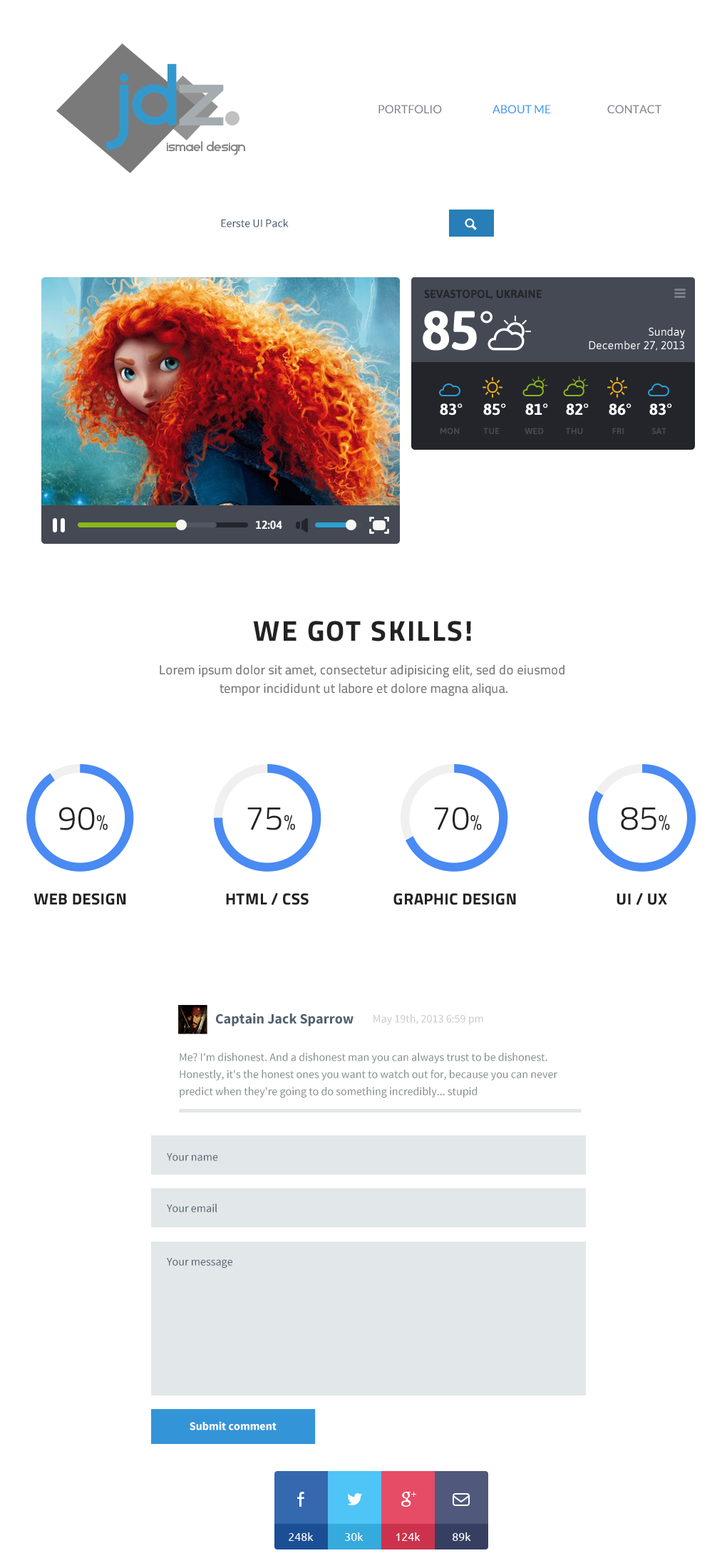
<style>
.page{position:relative;width:727px;height:1568px;background:#ffffff}
.page>*{position:absolute;margin:0}
.t1{font:11.4px "Lato-Regular";color:#7c8389;text-transform:uppercase}
.t2{font:11.4px "Lato-Regular";color:#4495f1;text-transform:uppercase}
.t3{font:11.4px "SourceSansPro-Regular";color:#384e64}
.t4{font:11.4px "Asap-Bold";color:#23252b;text-transform:uppercase}
.t5{font:55.5px "Asap-Bold";letter-spacing:0.025em;color:#ffffff}
.t6{font:11.4px "Asap-Regular";color:#ffffff}
.t7{font:15.7px "Asap-Bold";color:#ffffff;text-transform:uppercase;scale:1.04 1}
.t8{font:8.6px "Asap-Bold";color:#444953;text-transform:uppercase;scale:1.04 1}
.t9{font:11.4px "Asap-Bold";color:#ffffff}
.t10{font:28.5px "TitilliumWeb-Bold";letter-spacing:0.06em;color:#222222}
.t11{font:12.8px/18.5px "TitilliumWeb-Regular";letter-spacing:0.02em;color:#777777}
.t12{font:33.6px "TitilliumWeb-Light";letter-spacing:0.02em;color:#222222;text-transform:uppercase}
.t13{font:21.5px "TitilliumWeb-Light";letter-spacing:0.02em;color:#222222;text-transform:uppercase}
.t14{font:16.1px "TitilliumWeb-Bold";letter-spacing:0.02em;color:#222222;text-transform:uppercase}
.t15{font:14.3px "SourceSansPro-Bold";color:#526170}
.t16{font:11.4px "SourceSansPro-Regular";color:#c6cbce}
.t17{font:11.4px/17.1px "SourceSansPro-Regular";color:#7f8c8d}
.t18{font:11.4px "SourceSansPro-Regular";color:#526170}
.t19{font:11.4px "SourceSansPro-Bold";color:#ffffff}
.t20{font:11.4px "Ubuntu";color:#ffffff}
</style>
<div class="page">
<p class="t1" style="left:378px;top:105px;width:64px;height:8px">PORTFOLIO</p>
<p class="t2" style="left:492px;top:105px;width:59px;height:8px">ABOUT ME</p>
<p class="t1" style="left:607px;top:105px;width:54px;height:8px">CONTACT</p>
<p class="t3" style="left:221px;top:219px;width:68px;height:8px">Eerste UI Pack</p>
<p class="t4" style="left:424px;top:289px;width:118px;height:10px">Sevastopol, Ukraine</p>
<p class="t5" style="left:423px;top:311px;width:54px;height:40px">85</p>
<p class="t6" style="left:589px;top:327px;width:96px;height:24px;text-align:right">Sunday<br>December 27, 2013</p>
<p class="t7" style="left:440px;top:403px;width:23px;height:13px">83°</p>
<p class="t7" style="left:483px;top:403px;width:23px;height:13px">85°</p>
<p class="t7" style="left:525px;top:403px;width:23px;height:13px">81°</p>
<p class="t7" style="left:566px;top:403px;width:23px;height:13px">82°</p>
<p class="t7" style="left:609px;top:403px;width:22px;height:13px">86°</p>
<p class="t7" style="left:649px;top:403px;width:23px;height:13px">83°</p>
<p class="t8" style="left:440px;top:428px;width:20px;height:6px">mon</p>
<p class="t8" style="left:483px;top:428px;width:17px;height:6px">tue</p>
<p class="t8" style="left:525px;top:428px;width:19px;height:6px">wed</p>
<p class="t8" style="left:565px;top:428px;width:18px;height:6px">thu</p>
<p class="t8" style="left:612px;top:428px;width:12px;height:6px">fri</p>
<p class="t8" style="left:651px;top:428px;width:15px;height:6px">sat</p>
<p class="t9" style="left:256px;top:520px;width:26px;height:10px">12:04</p>
<p class="t10" style="left:253px;top:621px;width:218px;height:20px">WE GOT SKILLS!</p>
<p class="t11" style="left:160px;top:664px;width:404px;height:32px;text-align:center">Lorem ipsum dolor sit amet, consectetur adipisicing elit, sed do eiusmod <br>tempor incididunt ut labore et dolore magna aliqua.</p>
<p class="t12" style="left:59px;top:807px;width:49px;height:23px">90<span class="t13">%</span></p>
<p class="t12" style="left:247px;top:808px;width:48px;height:22px">75<span class="t13">%</span></p>
<p class="t12" style="left:434px;top:807px;width:48px;height:23px">70<span class="t13">%</span></p>
<p class="t12" style="left:621px;top:807px;width:49px;height:23px">85<span class="t13">%</span></p>
<p class="t14" style="left:33px;top:893px;width:93px;height:12px">Web Design</p>
<p class="t14" style="left:226px;top:892px;width:83px;height:13px">HTML / CSS</p>
<p class="t14" style="left:393px;top:893px;width:123px;height:12px">GRAPHIC DESIGN</p>
<p class="t14" style="left:617px;top:892px;width:50px;height:13px">UI / UX</p>
<p class="t15" style="left:216px;top:1013px;width:138px;height:13px">Captain Jack Sparrow</p>
<p class="t16" style="left:373px;top:1014px;width:110px;height:11px">May 19th, 2013 6:59 pm</p>
<p class="t17" style="left:180px;top:1053px;width:377px;height:45px">Me? I'm dishonest. And a dishonest man you can always trust to be dishonest. Honestly, it's the honest ones you want to watch out for, because you can never predict when they're going to do something incredibly... stupid</p>
<p class="t18" style="left:167px;top:1153px;width:51px;height:8px">Your name</p>
<p class="t18" style="left:167px;top:1204px;width:50px;height:8px">Your email</p>
<p class="t18" style="left:167px;top:1258px;width:65px;height:10px">Your message</p>
<p class="t19" style="left:190px;top:1421px;width:87px;height:9px">Submit comment</p>
<p class="t20" style="left:289px;top:1532px;width:25px;height:9px">248k</p>
<p class="t20" style="left:345px;top:1532px;width:18px;height:9px">30k</p>
<p class="t20" style="left:396px;top:1532px;width:25px;height:9px">124k</p>
<p class="t20" style="left:453px;top:1532px;width:18px;height:9px">89k</p>
</div>
